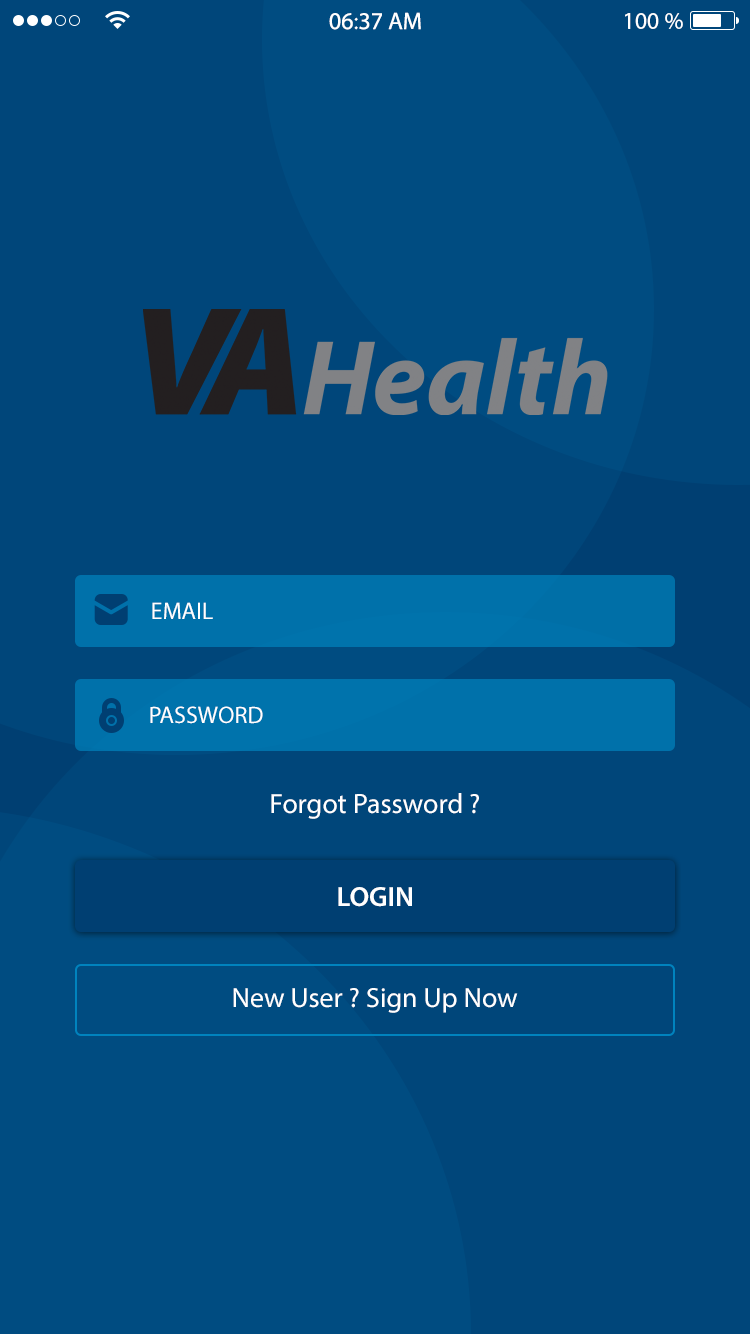
<style>
.page{position:relative;width:750px;height:1334px;background:#00467a}
.page>*{position:absolute;margin:0}
.t1{font:24px "MyriadPro-Regular";color:#ffffff}
.t2{font:28px "MyriadPro-Regular";color:#ffffff}
.t3{font:28px "MyriadPro-Semibold";color:#ffffff}
</style>
<div class="page">
<p class="t1" style="left:329px;top:12px;width:92px;height:18px">06:37 AM</p>
<p class="t1" style="left:625px;top:13px;width:58px;height:16px">100 %</p>
<p class="t1" style="left:152px;top:602px;width:61px;height:17px">EMAIL</p>
<p class="t1" style="left:150px;top:706px;width:113px;height:18px">PASSWORD</p>
<p class="t2" style="left:271px;top:793px;width:208px;height:26px">Forgot Password ?</p>
<p class="t3" style="left:338px;top:887px;width:74px;height:20px">LOGIN</p>
<p class="t2" style="left:233px;top:988px;width:285px;height:25px">New User ? Sign Up Now</p>
</div>
